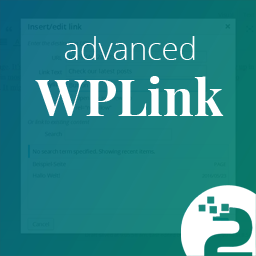
<style>
.page{position:relative;width:256px;height:256px}
.page>*{position:absolute;margin:0}
.t1{font:30.8px "OpenSans-Light";color:#ffffff}
.t2{font:50px "PlayfairDisplay-Bold";color:#ffffff}
</style>
<div class="page">
<p class="t1" style="left:64px;top:36px;width:131px;height:24px">advanced</p>
<p class="t2" style="left:35px;top:76px;width:189px;height:40px">WPLink</p>
</div>
